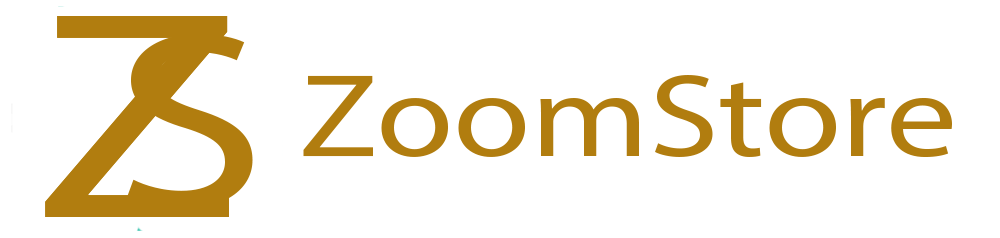
<style>
.page{position:relative;width:1000px;height:238px;background:#ffffff}
.page>*{position:absolute;margin:0}
.t1{font:298.6px "MyriadPro-Regular";color:#b17d0f;scale:1.25 1}
.t2{font:252.2px "MyriadPro-Regular";color:#b17d0f;scale:1.22 1}
.t3{font:118.7px "MyriadPro-Regular";color:#b17d0f;scale:1.19 1}
</style>
<div class="page">
<p class="t1" style="left:45px;top:16px;width:184px;height:201px">Z</p>
<p class="t1" style="left:45px;top:16px;width:184px;height:201px">Z</p>
<p class="t2" style="left:126px;top:33px;width:127px;height:177px">S</p>
<p class="t3" style="left:303px;top:75px;width:649px;height:82px">ZoomStore</p>
</div>
